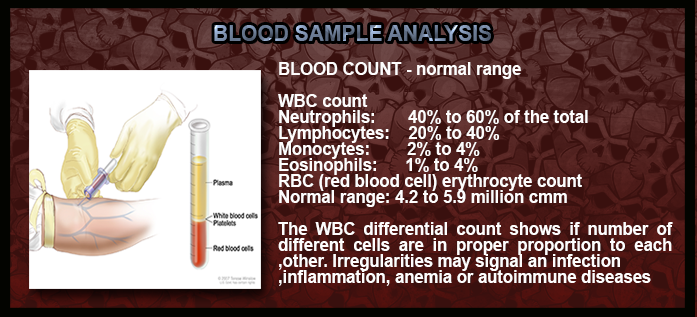
<style>
.page{position:relative;width:697px;height:317px}
.page>*{position:absolute;margin:0}
.t1{font:22.4px "Arial-BoldMT";letter-spacing:0.002em;scale:0.94 1}
.t2{font:17.6px/16px "Arial-BoldMT";letter-spacing:0.002em;color:#fefdfd;scale:0.94 1}
</style>
<div class="page">
<p class="t1" style="left:214px;top:25px;width:277px;height:16px">BLOOD SAMPLE ANALYSIS</p>
<p class="t2" style="left:278px;top:62px;width:395px;height:224px;text-align:justify">BLOOD COUNT - normal range<br><br>WBC count<br>Neutrophils:       40% to 60% of the total<br>Lymphocytes:    20% to 40% <br>Monocytes:        2% to 4%<br>Eosinophils:      1% to 4%<br>RBC (red blood cell) erythrocyte count<br>Normal range: 4.2 to 5.9 million cmm<br><br>The WBC differential count shows if number of different cells are in proper proportion to each other. Irregularities may signal an infection,<br>inflammation, anemia or autoimmune diseases,</p>
</div>
